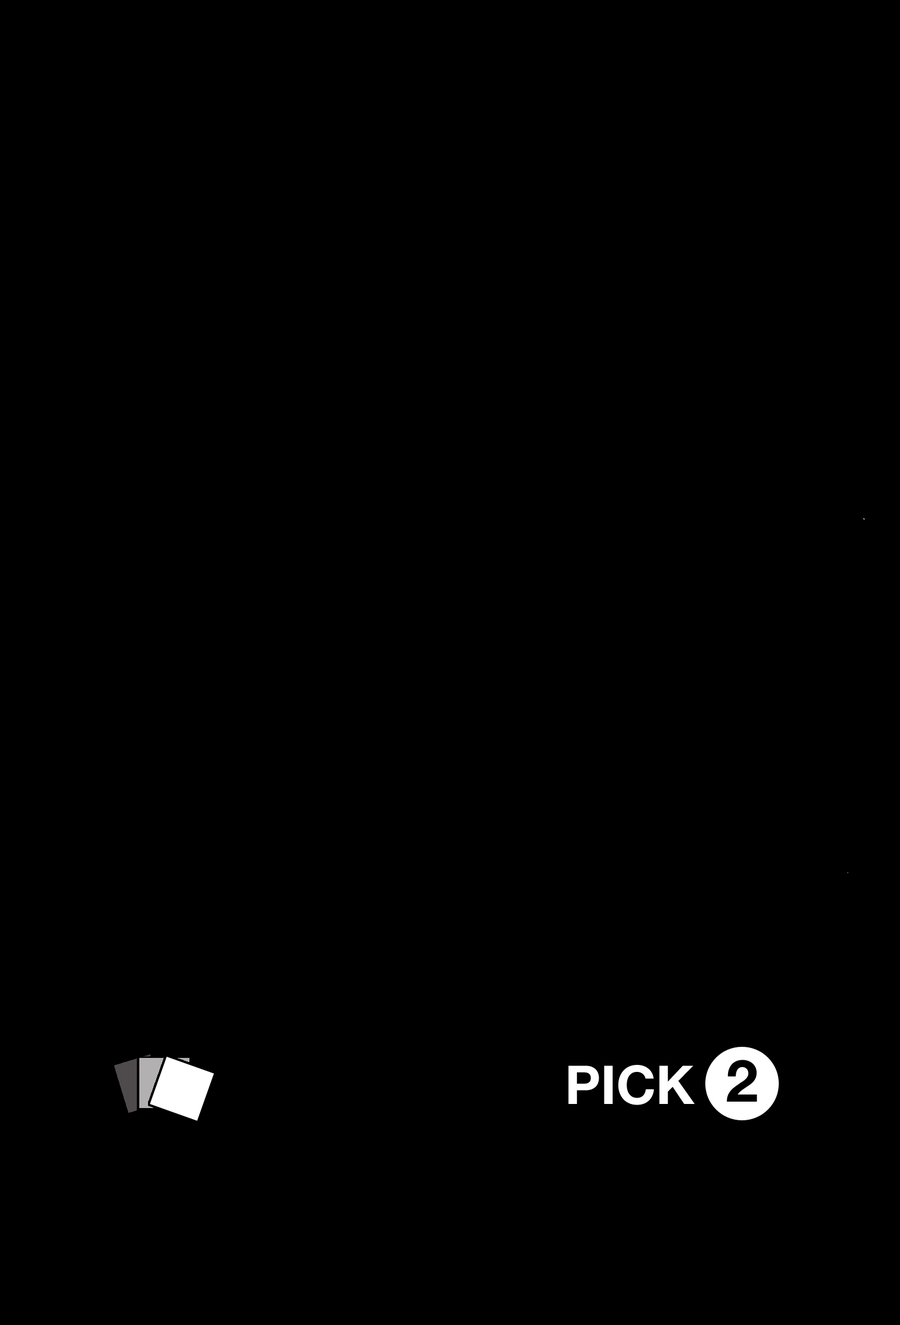
<style>
.page{position:relative;width:900px;height:1325px;background:#000000}
.page>*{position:absolute;margin:0}
.t1{font:58.3px "HelveticaNeue-Bold";color:#000000}
.t2{font:53.4px "HelveticaNeue-Bold";color:#ffffff}
</style>
<div class="page">
<p class="t1" style="left:727px;top:1059px;width:30px;height:42px">2</p>
<p class="t2" style="left:568px;top:1065px;width:127px;height:40px">PICK</p>
</div>
